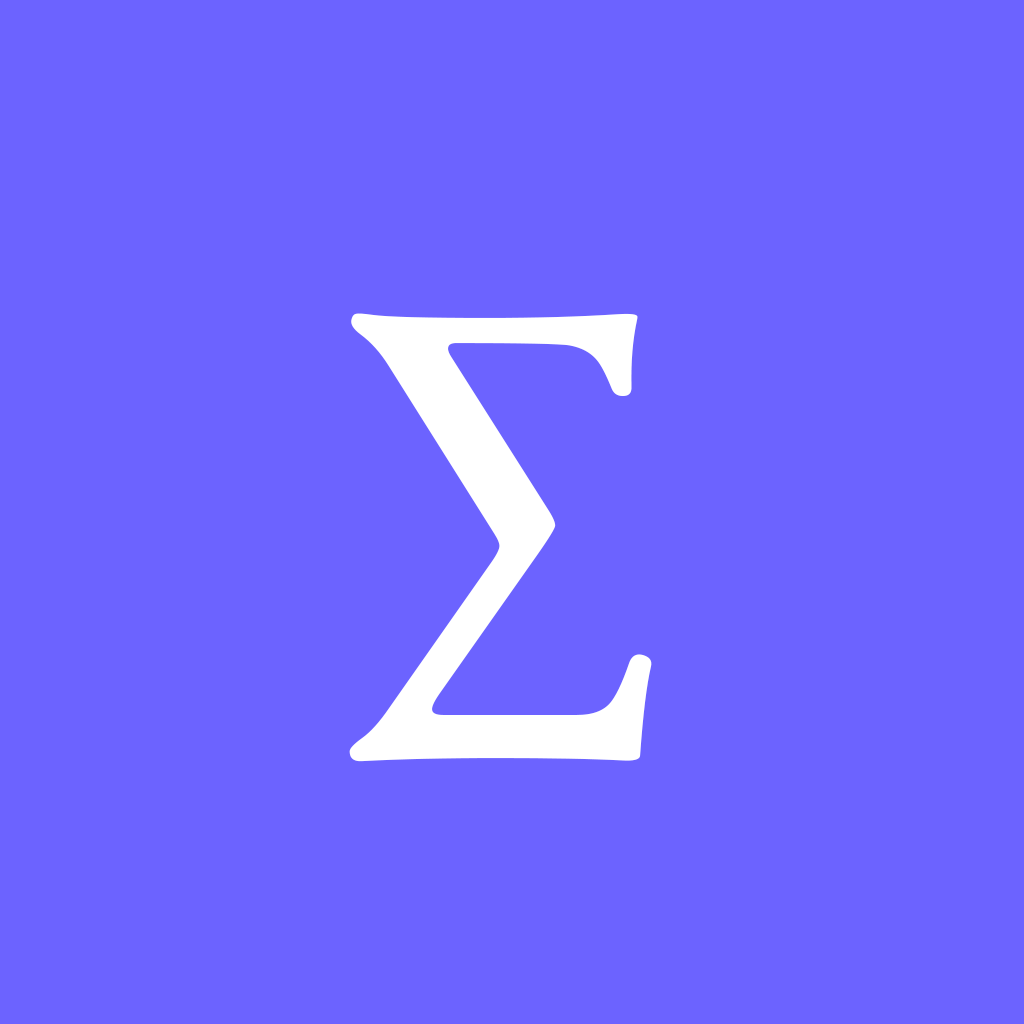
<style>
.page{position:relative;width:1024px;height:1024px;background:#6c63ff}
.page>*{position:absolute;margin:0}
.t1{font:605.7px "HighTowerText-Reg";color:#ffffff}
</style>
<div class="page">
<p class="t1" style="left:349px;top:313px;width:303px;height:449px">∑</p>
</div>
